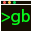
<style>
.page{position:relative;width:32px;height:32px;background:#140d02}
.page>*{position:absolute;margin:0}
.t1{font:17.2px "MyriadPro-Regular";color:#06fa1d}
</style>
<div class="page">
<p class="t1" style="left:1px;top:9px;width:29px;height:16px">&gt;gb</p>
</div>
